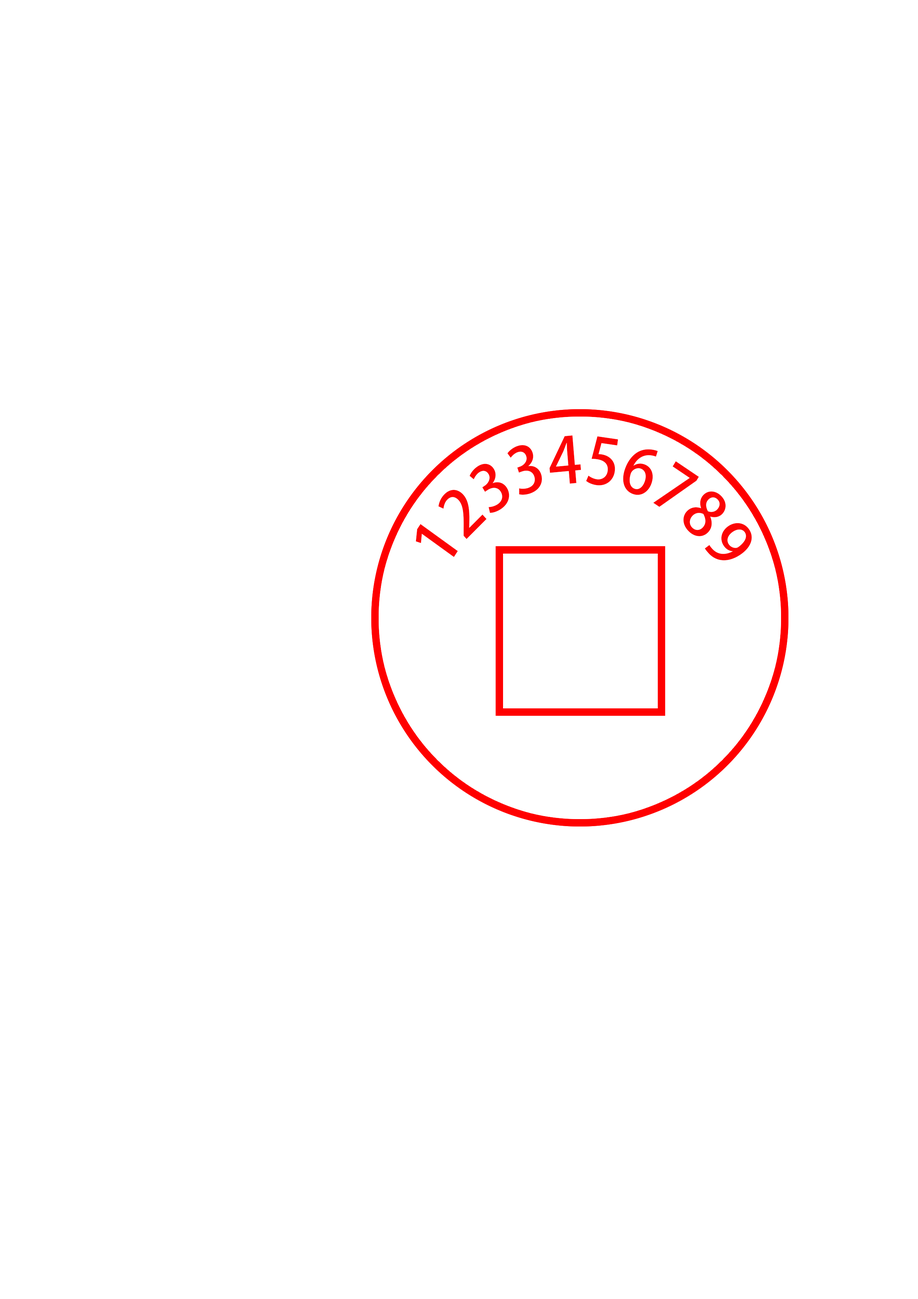
<style>
.page{position:relative;width:918px;height:1299px;background:#ffffff}
.page>*{position:absolute;margin:0}
.t1{font:61.5px "AdobeHeitiStd-Regular";color:#fc0404}
</style>
<div class="page">
<p class="t1" style="left:416px;top:435px;width:336px;height:126px;rotate:-51deg">1233456789</p>
</div>
